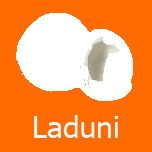
<style>
.page{position:relative;width:152px;height:152px;background:#ff6b00}
.page>*{position:absolute;margin:0}
.t1{font:30px "Tahoma";color:#f8f9fc}
</style>
<div class="page">
<p class="t1" style="left:34px;top:115px;width:84px;height:23px">Laduni</p>
</div>
